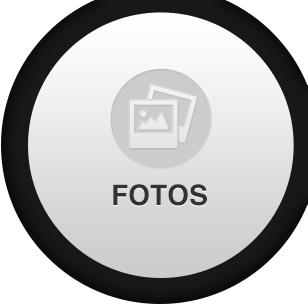
<style>
.page{position:relative;width:308px;height:305px}
.page>*{position:absolute;margin:0}
.t1{font:28px "Helvetica-Bold";color:#333333}
</style>
<div class="page">
<p class="t1" style="left:113px;top:184px;width:94px;height:22px">FOTOS</p>
</div>
